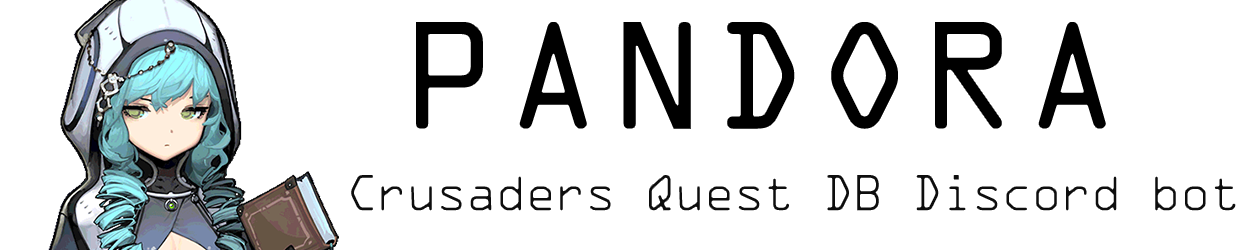
<style>
.page{position:relative;width:1250px;height:250px;background:#ffffff}
.page>*{position:absolute;margin:0}
.t1{font:139.3px "OCRAStd";letter-spacing:0.025em;color:#000000}
.t2{font:48px "OCRAStd";letter-spacing:-0.1em}
</style>
<div class="page">
<p class="t1" style="left:415px;top:21px;width:692px;height:109px">PANDORA</p>
<p class="t2" style="left:350px;top:174px;width:887px;height:38px">Crusaders Quest DB Discord bot</p>
</div>
